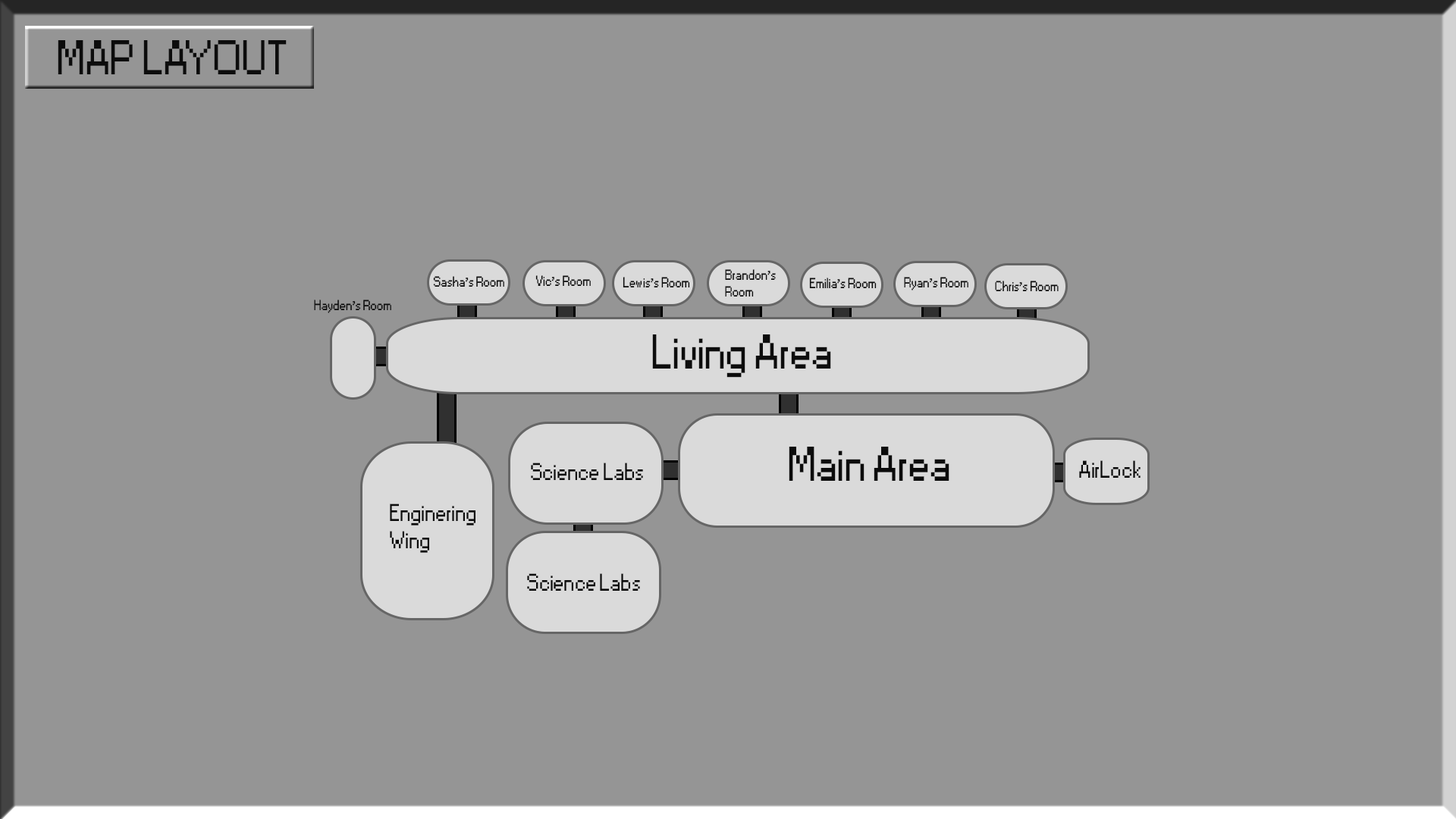
<style>
.page{position:relative;width:1456px;height:819px;background:#959595}
.page>*{position:absolute;margin:0}
.t1{font:45.5px "Small Fonts";color:#0c0c0c}
.t2{font:13.6px "Small Fonts";color:#0c0c0c}
.t3{font:22.7px "Small Fonts";color:#0c0c0c}
</style>
<div class="page">
<p class="t1" style="left:58px;top:40px;width:229px;height:34px">MAP LAYOUT</p>
<p class="t2" style="left:725px;top:269px;width:51px;height:28px">Brandon’s<br>Room</p>
<p class="t2" style="left:433px;top:276px;width:71px;height:11px">Sasha’s Room</p>
<p class="t2" style="left:535px;top:275px;width:56px;height:11px">Vic’s Room</p>
<p class="t2" style="left:623px;top:277px;width:67px;height:10px">Lewis’s Room</p>
<p class="t2" style="left:809px;top:278px;width:68px;height:10px">Emilia’s Room</p>
<p class="t2" style="left:904px;top:277px;width:64px;height:13px">Ryan’s Room</p>
<p class="t2" style="left:995px;top:281px;width:64px;height:10px">Chris’s Room</p>
<p class="t2" style="left:314px;top:300px;width:77px;height:13px">Hayden’s Room</p>
<p class="t1" style="left:652px;top:334px;width:179px;height:44px">Living Area</p>
<p class="t1" style="left:789px;top:447px;width:160px;height:34px">Main Area</p>
<p class="t3" style="left:1079px;top:460px;width:62px;height:18px">AirLock</p>
<p class="t3" style="left:531px;top:463px;width:112px;height:17px">Science Labs</p>
<p class="t3" style="left:390px;top:504px;width:85px;height:49px">Enginering<br>Wing</p>
<p class="t3" style="left:527px;top:573px;width:113px;height:18px">Science Labs</p>
</div>
